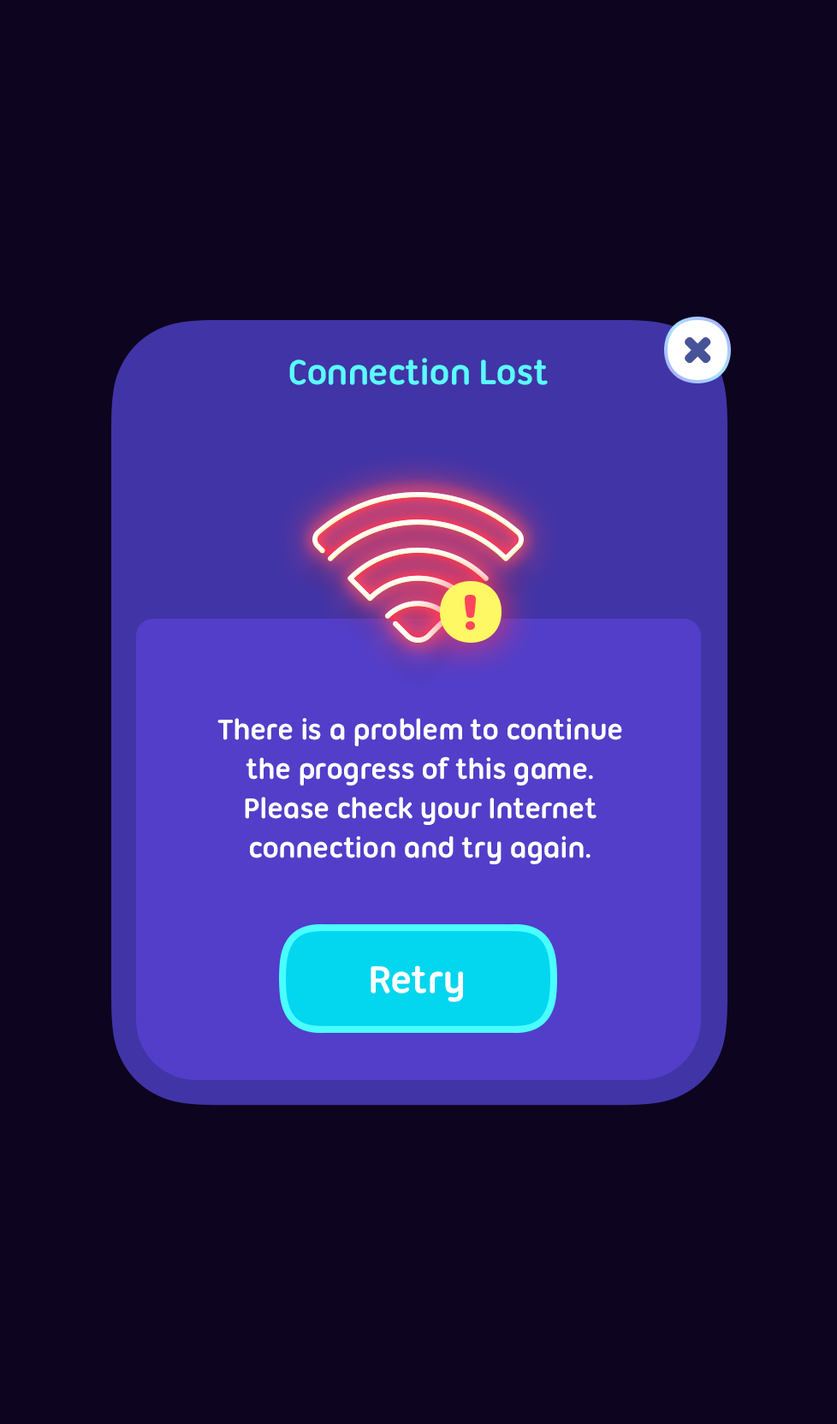
<style>
.page{position:relative;width:837px;height:1424px;background:#0d0420}
.page>*{position:absolute;margin:0}
.t1{font:37.7px "UbuntuTitling-Bold";letter-spacing:-0.025em;color:#5afdff}
.t2{font:30.8px/39.4px "UbuntuTitling-Bold";letter-spacing:-0.025em;color:#ffffff}
.t3{font:41.1px "UbuntuTitling-Bold";letter-spacing:-0.025em;color:#ffffff}
</style>
<div class="page">
<p class="t1" style="left:289px;top:358px;width:259px;height:27px">Connection Lost</p>
<p class="t2" style="left:217px;top:718px;width:405px;height:147px;text-align:center">There is a problem to continue<br>the progress of this game.<br>Please check your Internet<br>connection and try again.</p>
<p class="t3" style="left:371px;top:966px;width:92px;height:36px">Retry</p>
</div>
